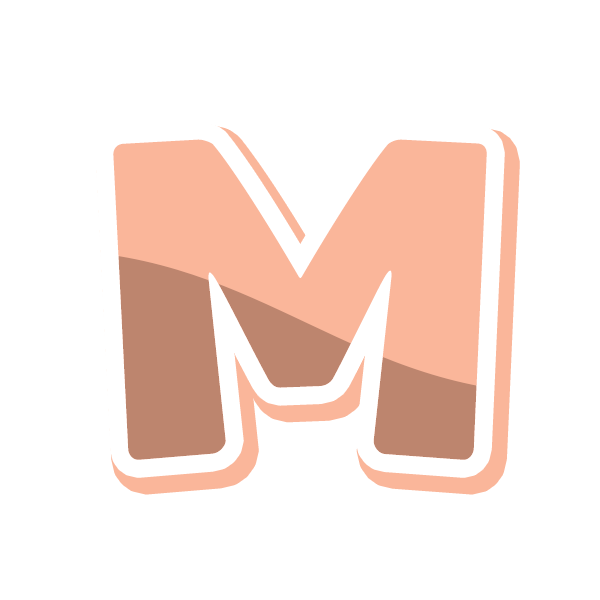
<style>
.page{position:relative;width:600px;height:600px;background:#ffffff}
.page>*{position:absolute;margin:0}
.t1{font:380px "YurukaStd-UB";letter-spacing:0.06em}
.t2{font:380px "YurukaStd-UB";letter-spacing:0.06em;color:#fab69a}
</style>
<div class="page">
<p class="t1" style="left:113px;top:139px;width:374px;height:321px">M</p>
<p class="t2" style="left:113px;top:139px;width:374px;height:321px">M</p>
<p class="t1" style="left:121px;top:149px;width:374px;height:321px">M</p>
</div>
